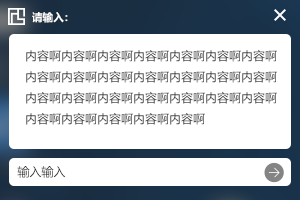
<style>
.page{position:relative;width:300px;height:200px;background:#ffffff}
.page>*{position:absolute;margin:0}
.t1{font:10.7px "MicrosoftYaHei-Bold";color:#ffffff}
.t2{font:12px "MicrosoftYaHei"}
.t3{font:12px "MicrosoftYaHei";color:#323232}
</style>
<div class="page">
<p class="t1" style="left:32px;top:12px;width:36px;height:11px">请输入：</p>
<p class="t2" style="left:26px;top:50px;width:251px;height:75px">内容啊内容啊内容啊内容啊内容啊内容啊内容啊<br>内容啊内容啊内容啊内容啊内容啊内容啊内容啊<br>内容啊内容啊内容啊内容啊内容啊内容啊内容啊<br>内容啊内容啊内容啊内容啊内容啊</p>
<p class="t3" style="left:17px;top:166px;width:49px;height:12px">输入输入</p>
</div>
